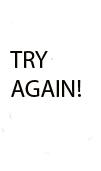
<style>
.page{position:relative;width:101px;height:171px;background:#ffffff}
.page>*{position:absolute;margin:0}
.t1{font:24px "MyriadPro-Regular";color:#090700}
</style>
<div class="page">
<p class="t1" style="left:10px;top:51px;width:71px;height:46px">TRY <br>AGAIN!</p>
</div>
